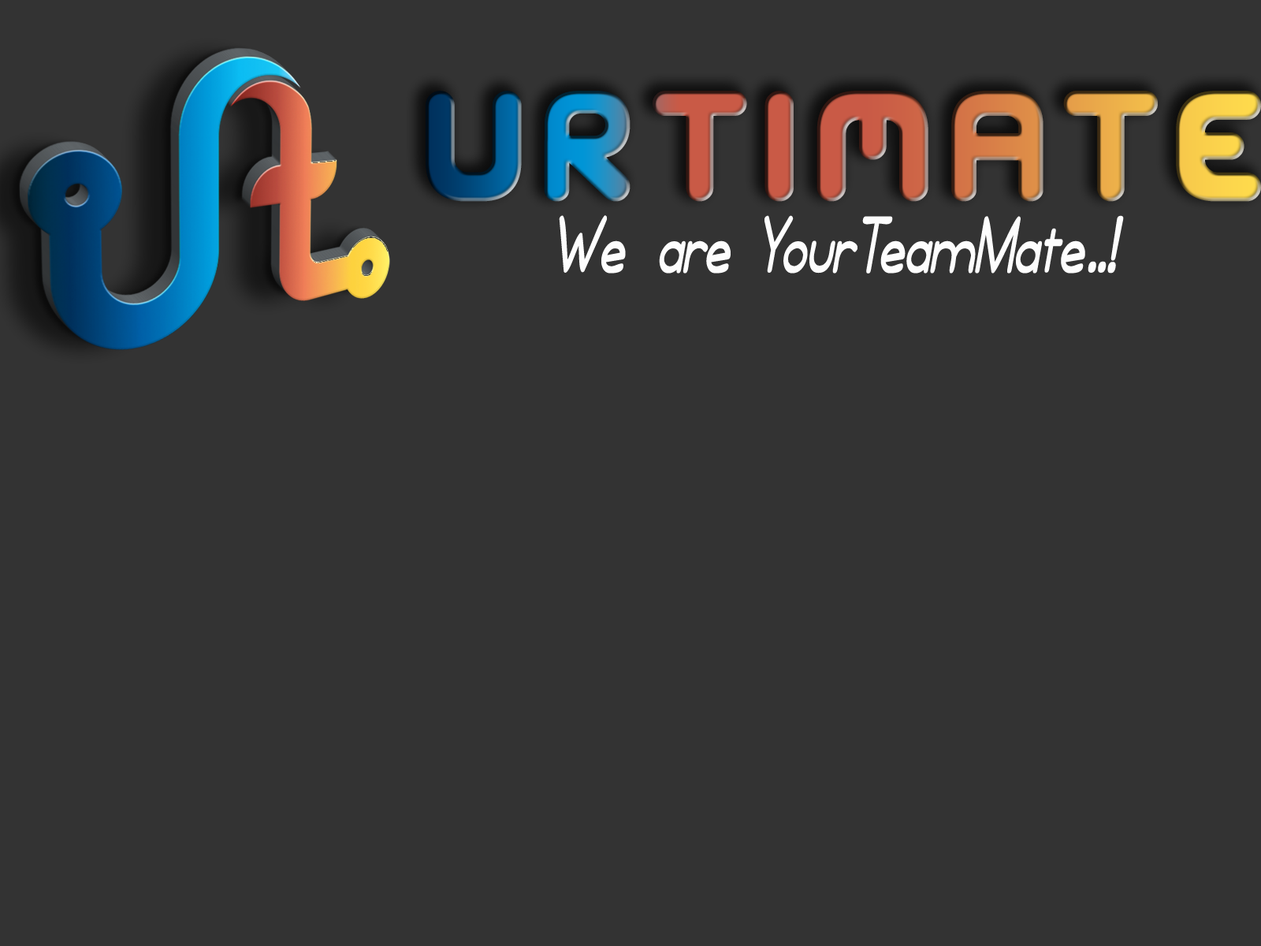
<style>
.page{position:relative;width:1261px;height:946px;background:#333333}
.page>*{position:absolute;margin:0}
.t1{font:137.7px "BDWurst";letter-spacing:0.1em}
.t2{font:108.8px "Calan";color:#fdfdfd;font-style:italic}
</style>
<div class="page">
<p class="t1" style="left:426px;top:91px;width:835px;height:111px">URTIMATE</p>
<p class="t2" style="left:559px;top:215px;width:172px;height:58px">We are</p>
<p class="t2" style="left:764px;top:215px;width:321px;height:58px">YourTeamMate</p>
<p class="t2" style="left:1088px;top:215px;width:36px;height:58px">..!</p>
</div>
